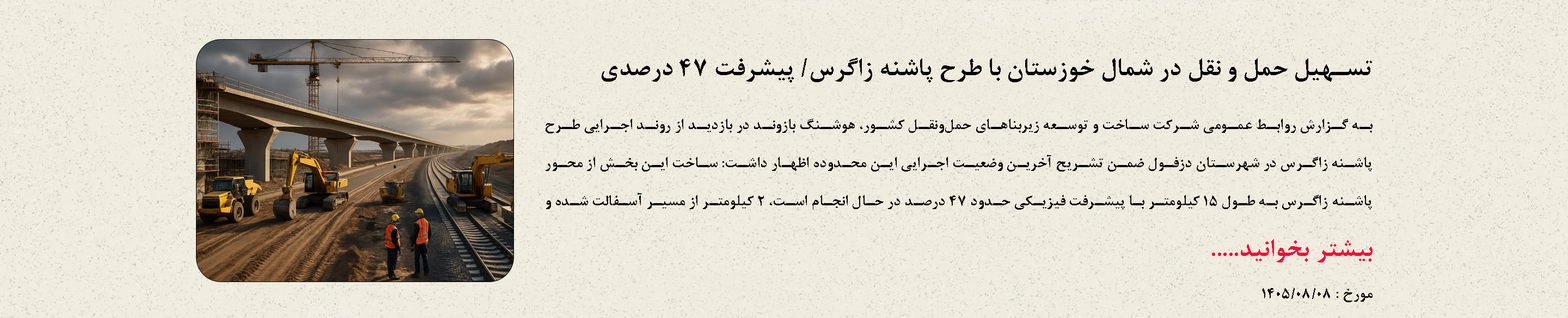
<style>
.page{position:relative;width:1568px;height:318px}
.page>*{position:absolute;margin:0}
.t1{font:27.2px "BNazaninBold";letter-spacing:0.01em;color:#050505}
.t2{font:16.3px/38.1px "BNazaninBold";letter-spacing:0.01em;color:#050505}
.t3{font:27.2px "BNazaninBold";letter-spacing:0.01em;color:#f10e34}
</style>
<div class="page">
<p class="t1" style="left:602px;top:58px;width:770px;height:25px">تسهیل حمل و نقل در شمال خوزستان با طرح پاشنه زاگرس/ پیشرفت 47 درصدی</p>
<p class="t2" style="left:546px;top:119px;width:827px;height:91px;text-align:justify">به گزارش روابط عمومی شرکت ساخت و توسعه زیربناهای حمل‌ونقل کشور، هوشنگ بازوند در بازدید از روند اجرایی طرح پاشنه زاگرس در شهرستان دزفول ضمن تشریح آخرین وضعیت اجرایی این محدوده اظهار داشت: ساخت این بخش از محور پاشنه زاگرس به طول 15 کیلومتر با پیشرفت فیزیکی حدود 47 درصد در حال انجام است، 2 کیلومتر از مسیر آسفالت شده و زیر عبور قرار گرفته است و عملیات خاکی بخش‌های باقی‌مانده نیز حدود 60 درصد پیشرفت فیزیکی دارد</p>
<p class="t3" style="left:1212px;top:239px;width:161px;height:23px">.....بیشتر بخوانید</p>
</div>
